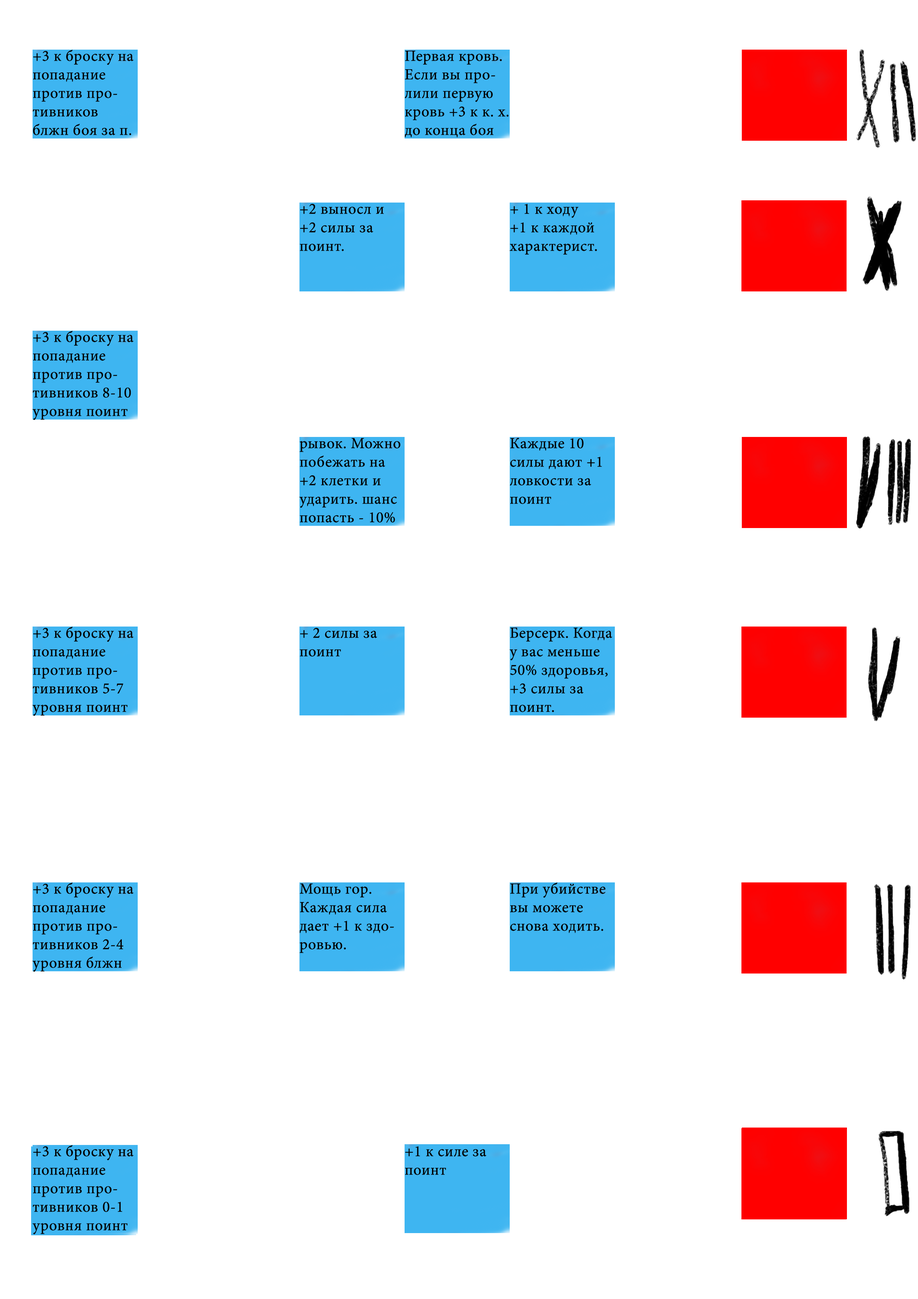
<style>
.page{position:relative;width:918px;height:1299px;background:#ffffff}
.page>*{position:absolute;margin:0}
.t1{font:15.4px "MinionPro-Regular";color:#000000;font-weight:bold}
</style>
<div class="page">
<p class="t1" style="left:33px;top:50px;width:101px;height:85px">+3 к броску на попадание против противников блжн боя за п.</p>
<p class="t1" style="left:405px;top:51px;width:104px;height:86px">Первая кровь. Если вы пролили первую кровь +3 к к. х. до конца боя</p>
<p class="t1" style="left:300px;top:204px;width:84px;height:47px">+2 выносл и +2 силы за поинт.</p>
<p class="t1" style="left:509px;top:204px;width:88px;height:51px">+ 1 к ходу<br>+1 к каждой характерист.</p>
<p class="t1" style="left:32px;top:331px;width:102px;height:89px">+3 к броску на попадание против противников 8-10 уровня поинт</p>
<p class="t1" style="left:299px;top:438px;width:102px;height:85px">рывок. Можно побежать на +2 клетки и ударить. шанс попасть - 10%</p>
<p class="t1" style="left:510px;top:438px;width:92px;height:66px">Каждые 10 силы дают +1 ловкости за поинт</p>
<p class="t1" style="left:32px;top:626px;width:102px;height:90px">+3 к броску на попадание против противников 5-7 уровня поинт</p>
<p class="t1" style="left:300px;top:628px;width:77px;height:28px">+ 2 силы за поинт</p>
<p class="t1" style="left:509px;top:627px;width:103px;height:85px">Берсерк. Когда у вас меньше 50% здоровья, +3 силы за поинт.</p>
<p class="t1" style="left:32px;top:882px;width:102px;height:90px">+3 к броску на попадание против противников 2-4 уровня блжн</p>
<p class="t1" style="left:300px;top:883px;width:94px;height:70px">Мощь гор. Каждая сила дает +1 к здоровью.</p>
<p class="t1" style="left:510px;top:882px;width:96px;height:51px">При убийстве вы можете снова ходить.</p>
<p class="t1" style="left:32px;top:1145px;width:102px;height:89px">+3 к броску на попадание против противников 0-1 уровня поинт</p>
<p class="t1" style="left:405px;top:1146px;width:81px;height:29px">+1 к силе за поинт</p>
</div>
